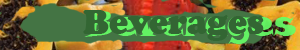
<style>
.page{position:relative;width:300px;height:50px}
.page>*{position:absolute;margin:0}
.t1{font:36px "SnapITC-Regular"}
.t2{font:36px "CooperBlack";color:#336633}
</style>
<div class="page">
<p class="t1" style="left:83px;top:10px;width:213px;height:34px">Beverages</p>
<p class="t2" style="left:83px;top:10px;width:181px;height:31px">Beverages</p>
</div>
